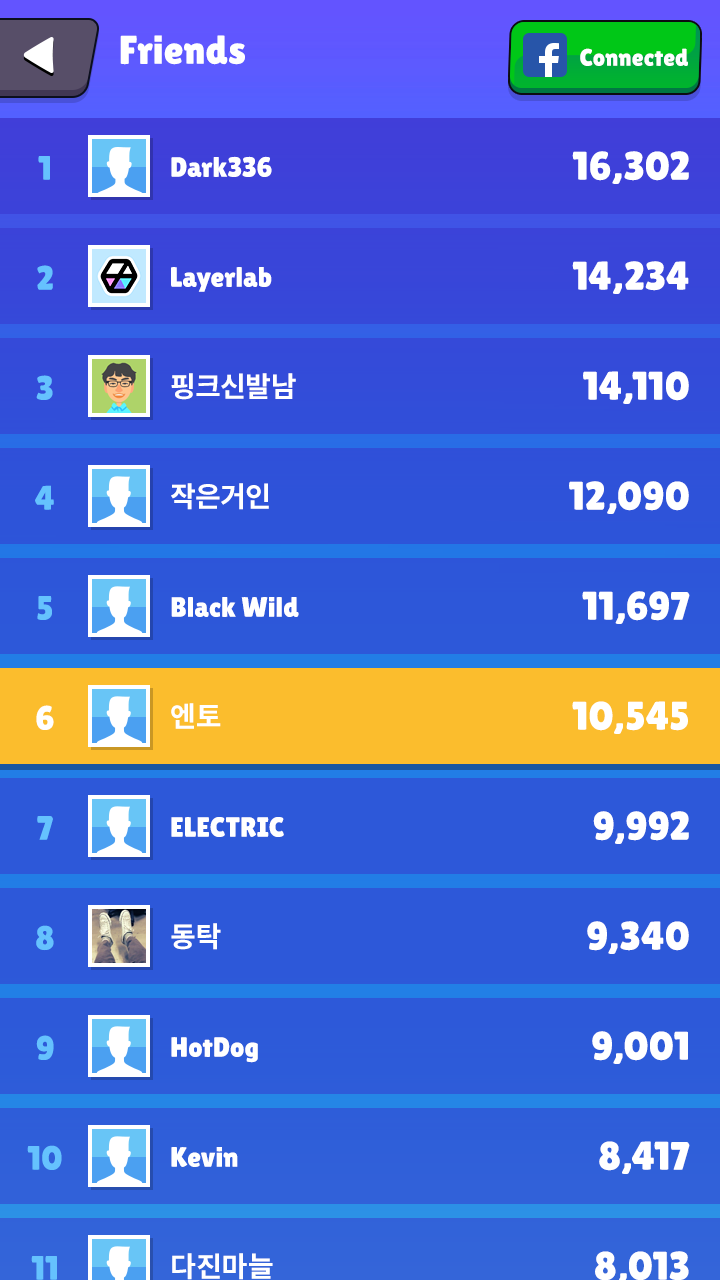
<style>
.page{position:relative;width:720px;height:1280px}
.page>*{position:absolute;margin:0}
.t1{font:40px "LilitaOne";color:#ffffff}
.t2{font:24px "LilitaOne";color:#ffffff}
.t3{font:34px/110px "LilitaOne";color:#65c2fe}
.t4{font:34px/110px "LilitaOne";color:#ffffff}
.t5{font:28px/110px "LilitaOne";color:#ffffff}
.t6{font:28px/110px "NotoSansCJKjp-Bold";color:#ffffff}
</style>
<div class="page">
<p class="t1" style="left:120px;top:35px;width:125px;height:30px">Friends</p>
<p class="t2" style="left:580px;top:48px;width:108px;height:18px">Connected</p>
<p class="t3" style="left:27px;top:156px;width:35px;height:1124px;text-align:center">1<br>2<br>3<br>4<br>5<br><span class="t4">6<br></span>7<br>8<br>9<br>10<br>11</p>
<p class="t5" style="left:171px;top:156px;width:128px;height:1124px">Dark336<br>Layerlab<br><span class="t6">핑크신발남<br>작은거인<br></span>Black Wild<br><span class="t6">엔토<br></span>ELECTRIC<br><span class="t6">동탁<br></span>HotDog<br>Kevin<br><span class="t6">다진마늘</span></p>
</div>
